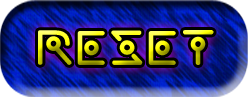
<style>
.page{position:relative;width:248px;height:97px}
.page>*{position:absolute;margin:0}
.t1{font:50px "wearealien!!"}
</style>
<div class="page">
<p class="t1" style="left:38px;top:30px;width:176px;height:35px">Reset</p>
</div>
